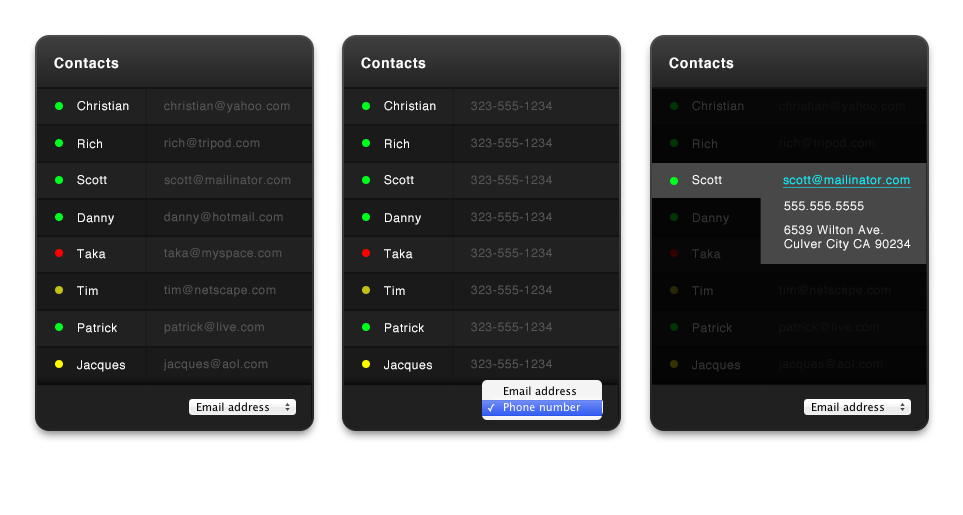
<style>
.page{position:relative;width:963px;height:515px;background:#ffffff}
.page>*{position:absolute;margin:0}
.t1{font:14px "Helvetica-Bold";letter-spacing:0.05em;color:#ffffff}
.t2{font:12px "Helvetica";letter-spacing:0.05em;color:#ffffff}
.t3{font:12px "Helvetica";letter-spacing:0.05em;color:#565656}
.t4{font:12px "Helvetica";letter-spacing:0.05em;color:#333333}
.t5{font:12px "Helvetica";letter-spacing:0.05em;color:#111111}
.t6{font:12px "Helvetica";letter-spacing:0.05em;color:#00f6ff;text-decoration:underline}
</style>
<div class="page">
<p class="t1" style="left:54px;top:57px;width:65px;height:12px">Contacts</p>
<p class="t1" style="left:361px;top:57px;width:65px;height:12px">Contacts</p>
<p class="t1" style="left:669px;top:57px;width:65px;height:12px">Contacts</p>
<p class="t2" style="left:77px;top:101px;width:52px;height:10px">Christian</p>
<p class="t3" style="left:164px;top:101px;width:126px;height:12px">christian@yahoo.com</p>
<p class="t2" style="left:384px;top:101px;width:52px;height:10px">Christian</p>
<p class="t3" style="left:471px;top:101px;width:81px;height:10px">323-555-1234</p>
<p class="t4" style="left:692px;top:101px;width:52px;height:10px">Christian</p>
<p class="t5" style="left:779px;top:101px;width:126px;height:12px">christian@yahoo.com</p>
<p class="t2" style="left:78px;top:139px;width:24px;height:10px">Rich</p>
<p class="t3" style="left:164px;top:138px;width:96px;height:12px">rich@tripod.com</p>
<p class="t2" style="left:385px;top:139px;width:24px;height:10px">Rich</p>
<p class="t3" style="left:471px;top:138px;width:81px;height:10px">323-555-1234</p>
<p class="t4" style="left:693px;top:139px;width:24px;height:10px">Rich</p>
<p class="t5" style="left:779px;top:138px;width:96px;height:12px">rich@tripod.com</p>
<p class="t2" style="left:77px;top:175px;width:30px;height:10px">Scott</p>
<p class="t3" style="left:164px;top:175px;width:127px;height:10px">scott@mailinator.com</p>
<p class="t2" style="left:384px;top:175px;width:30px;height:10px">Scott</p>
<p class="t3" style="left:471px;top:175px;width:81px;height:10px">323-555-1234</p>
<p class="t2" style="left:692px;top:175px;width:30px;height:10px">Scott</p>
<p class="t2" style="left:692px;top:175px;width:30px;height:10px">Scott</p>
<p class="t6" style="left:783px;top:175px;width:128px;height:13px">scott@mailinator.com</p>
<p class="t2" style="left:784px;top:201px;width:80px;height:10px">555.555.5555</p>
<p class="t2" style="left:78px;top:213px;width:36px;height:12px">Danny</p>
<p class="t3" style="left:164px;top:212px;width:119px;height:12px">danny@hotmail.com</p>
<p class="t2" style="left:385px;top:213px;width:36px;height:12px">Danny</p>
<p class="t3" style="left:471px;top:212px;width:81px;height:10px">323-555-1234</p>
<p class="t4" style="left:693px;top:213px;width:36px;height:12px">Danny</p>
<p class="t2" style="left:784px;top:225px;width:127px;height:26px">6539 Wilton Ave.<br>Culver City CA 90234</p>
<p class="t2" style="left:77px;top:249px;width:29px;height:10px">Taka</p>
<p class="t3" style="left:164px;top:248px;width:118px;height:12px">taka@myspace.com</p>
<p class="t2" style="left:384px;top:249px;width:29px;height:10px">Taka</p>
<p class="t3" style="left:471px;top:248px;width:81px;height:10px">323-555-1234</p>
<p class="t4" style="left:692px;top:249px;width:29px;height:10px">Taka</p>
<p class="t2" style="left:77px;top:286px;width:21px;height:9px">Tim</p>
<p class="t3" style="left:164px;top:285px;width:112px;height:12px">tim@netscape.com</p>
<p class="t2" style="left:384px;top:286px;width:21px;height:9px">Tim</p>
<p class="t3" style="left:471px;top:285px;width:81px;height:10px">323-555-1234</p>
<p class="t4" style="left:692px;top:286px;width:21px;height:9px">Tim</p>
<p class="t5" style="left:779px;top:285px;width:112px;height:12px">tim@netscape.com</p>
<p class="t2" style="left:78px;top:323px;width:39px;height:10px">Patrick</p>
<p class="t3" style="left:164px;top:322px;width:100px;height:12px">patrick@live.com</p>
<p class="t2" style="left:385px;top:323px;width:39px;height:10px">Patrick</p>
<p class="t3" style="left:471px;top:322px;width:81px;height:10px">323-555-1234</p>
<p class="t4" style="left:693px;top:323px;width:39px;height:10px">Patrick</p>
<p class="t5" style="left:779px;top:322px;width:100px;height:12px">patrick@live.com</p>
<p class="t2" style="left:77px;top:360px;width:48px;height:12px">Jacques</p>
<p class="t3" style="left:163px;top:359px;width:105px;height:12px">jacques@aol.com</p>
<p class="t2" style="left:384px;top:360px;width:48px;height:12px">Jacques</p>
<p class="t3" style="left:471px;top:359px;width:81px;height:10px">323-555-1234</p>
<p class="t4" style="left:692px;top:360px;width:48px;height:12px">Jacques</p>
<p class="t5" style="left:778px;top:359px;width:105px;height:12px">jacques@aol.com</p>
</div>
